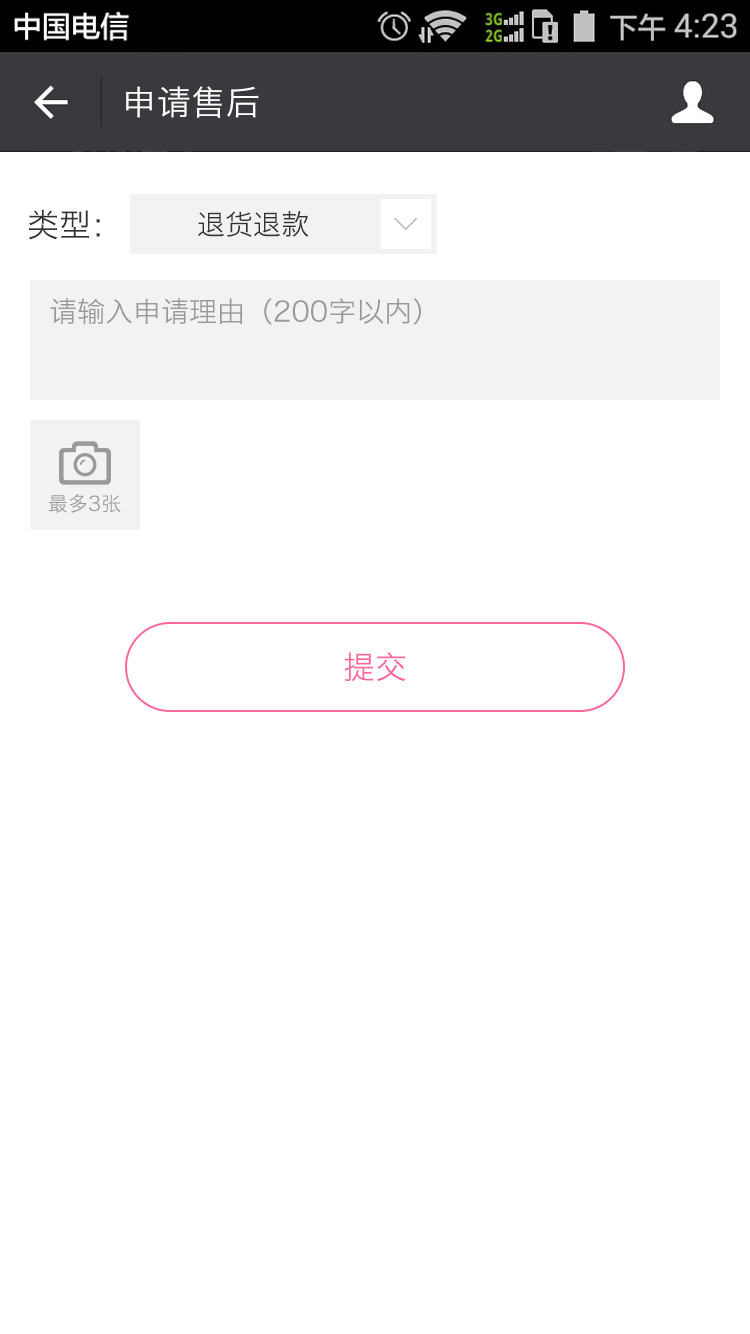
<style>
.page{position:relative;width:750px;height:1334px;background:#ffffff}
.page>*{position:absolute;margin:0}
.t1{font:34px "HiraginoSansGB-W3";letter-spacing:0.022em;color:#ffffff}
.t2{font:32px "HiraginoSansGB-W3";color:#333333}
.t3{font:28px "HiraginoSansGB-W3";color:#333333}
.t4{font:32px "SimSun";color:#bbbbbb;font-weight:bold}
.t5{font:28px "HiraginoSansGB-W3";color:#999999}
.t6{font:20px "HiraginoSansGB-W3";color:#999999}
.t7{font:32px "HiraginoSansGB-W3";color:#ff6699}
</style>
<div class="page">
<p class="t1" style="left:126px;top:86px;width:133px;height:32px">申请售后</p>
<p class="t2" style="left:28px;top:209px;width:72px;height:31px">类型：</p>
<p class="t3" style="left:198px;top:211px;width:111px;height:26px">退货退款</p>
<p class="t4" style="left:394px;top:217px;width:23px;height:14px;rotate:90deg">&gt;</p>
<p class="t5" style="left:50px;top:298px;width:371px;height:27px">请输入申请理由（200字以内）</p>
<p class="t6" style="left:49px;top:494px;width:72px;height:19px">最多3张</p>
<p class="t7" style="left:344px;top:652px;width:62px;height:30px">提交</p>
</div>
